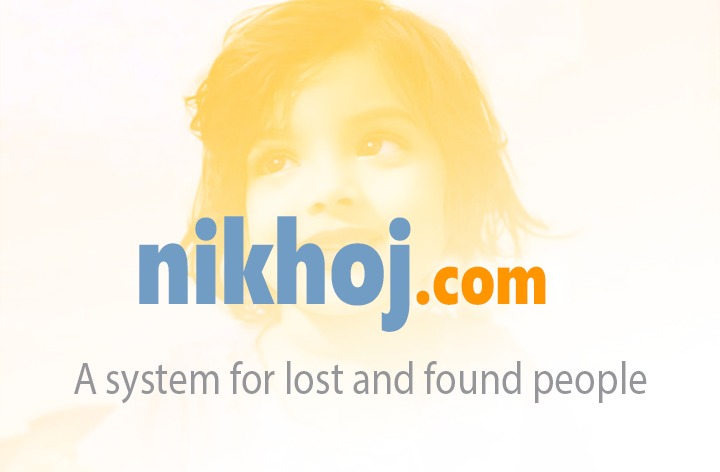
<style>
.page{position:relative;width:720px;height:472px}
.page>*{position:absolute;margin:0}
.t1{font:118.2px "SegoeUIBlack";color:#719cc4;scale:0.76 1}
.t2{font:72.9px "SegoeUIBlack";color:#ff9600;scale:0.76 1}
.t3{font:45.8px "MyriadPro-Regular";color:#95969a;scale:0.87 1}
</style>
<div class="page">
<p class="t1" style="left:139px;top:216px;width:407px;height:116px">nikhoj<span class="t2">.com</span></p>
<p class="t3" style="left:74px;top:361px;width:573px;height:43px">A system for lost and found people</p>
</div>
